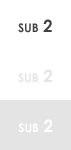
<style>
.page{position:relative;width:71px;height:150px;background:#ffffff}
.page>*{position:absolute;margin:0}
.t1{font:17px "CenturyGothic-Bold";color:#424242;font-variant:small-caps}
.t2{font:17px "CenturyGothic-Bold";color:#e4e4e4;font-variant:small-caps}
.t3{font:17px "CenturyGothic-Bold";color:#ffffff;font-variant:small-caps}
</style>
<div class="page">
<p class="t1" style="left:18px;top:19px;width:34px;height:14px">sub 2</p>
<p class="t2" style="left:18px;top:69px;width:34px;height:14px">sub 2</p>
<p class="t3" style="left:18px;top:119px;width:35px;height:14px">sub 2</p>
</div>
